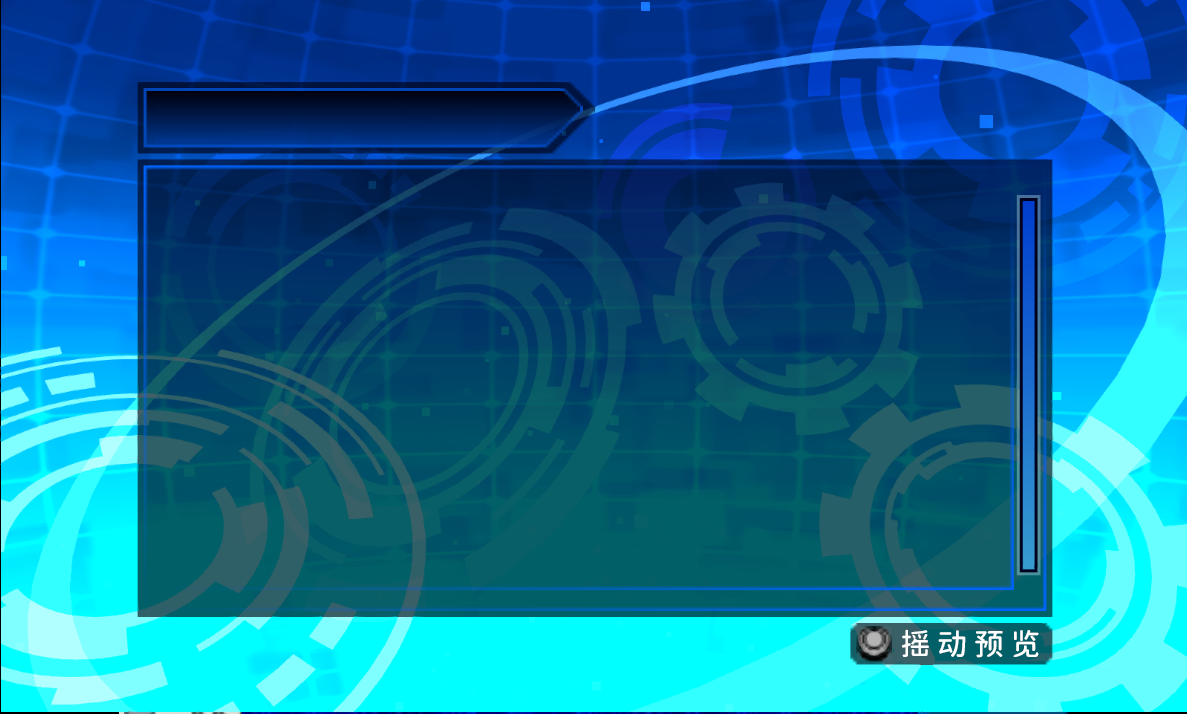
<style>
.page{position:relative;width:1187px;height:714px}
.page>*{position:absolute;margin:0}
.t1{font:30px "JiangChengYuanTi-500W";color:#ffffff}
</style>
<div class="page">
<p class="t1" style="left:902px;top:629px;width:137px;height:29px">摇 动 预 览</p>
</div>
